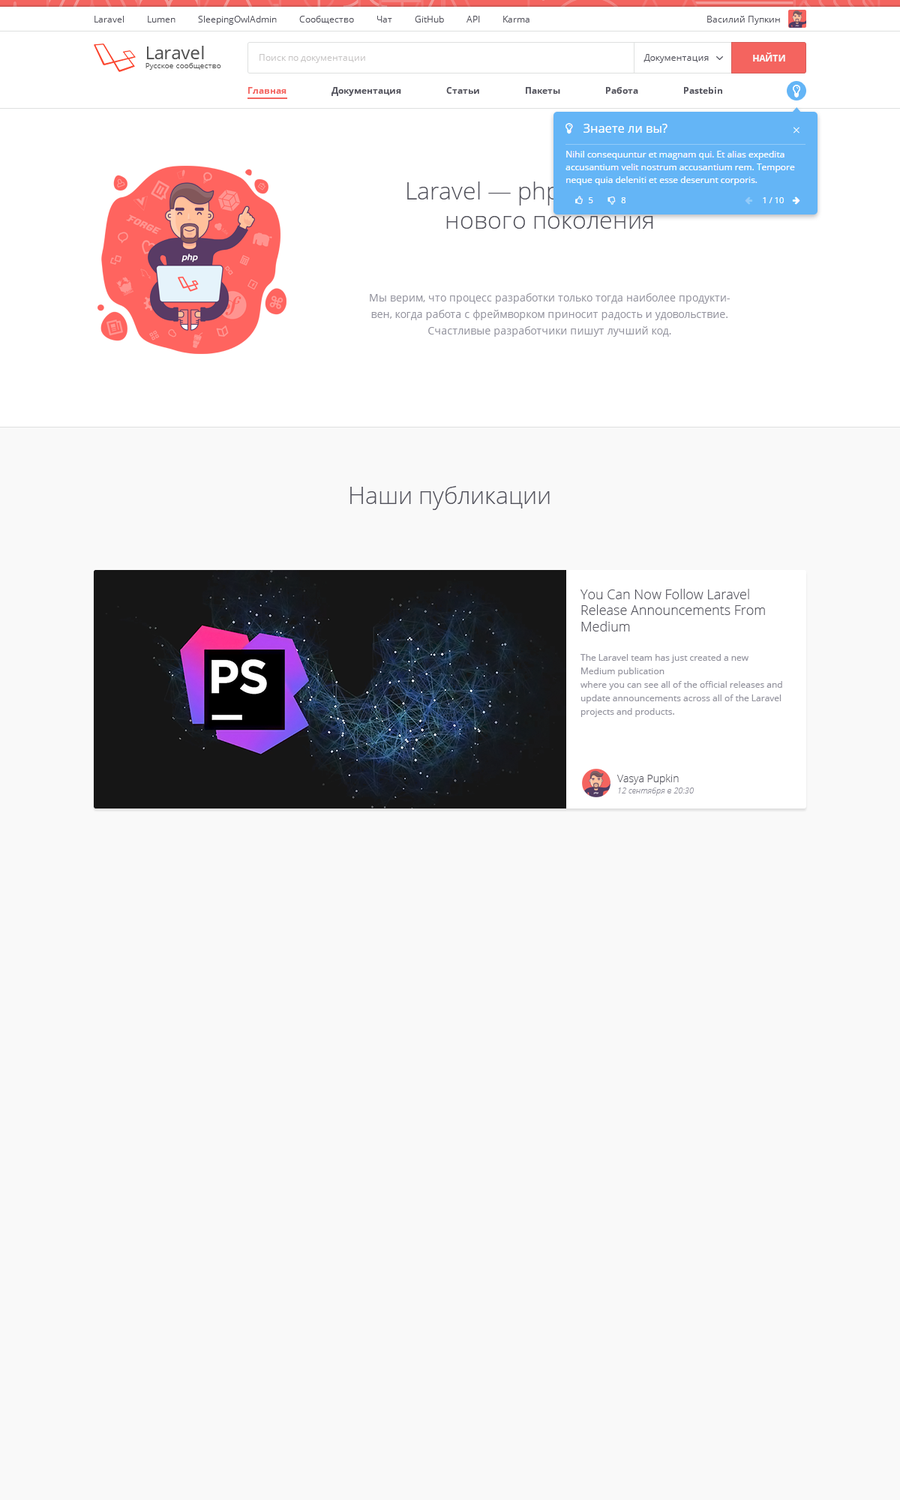
<style>
.page{position:relative;width:900px;height:1500px;background:#f9f9f9}
.page>*{position:absolute;margin:0}
.t1{font:9px "OpenSans";color:#52525c}
.t2{font:7.5px "OpenSans";color:#525252}
.t3{font:18px "OpenSans";color:#525252}
.t4{font:9px "OpenSans";color:#c7c5c5}
.t5{font:9px "OpenSans-Bold";color:#f9f9f9}
.t6{font:9px "OpenSans-Bold";color:#52525c}
.t7{font:9px "OpenSans-Bold";color:#f4645f}
.t8{font:24px "OpenSans-Light";color:#52525c}
.t9{font:10.5px/16.5px "OpenSans";color:#93939e}
.t10{font:13.5px "OpenSans-Light";color:#52525c}
.t11{font:9px/13.5px "OpenSans";color:#93939e}
.t12{font:10.5px "OpenSans-Light";color:#52525c}
.t13{font:8.2px "OpenSansLight-Italic";color:#93939e}
</style>
<div class="page">
<p class="t1" style="left:94px;top:16px;width:436px;height:9px">Laravel          Lumen          SleepingOwlAdmin          Сообщество          Чат          GitHub          API          Karma</p>
<p class="t1" style="left:707px;top:16px;width:73px;height:9px">Василий Пупкин</p>
<p class="t2" style="left:146px;top:46px;width:75px;height:24px"><span class="t3">Laravel<br></span>Русское сообщество</p>
<p class="t4" style="left:260px;top:54px;width:105px;height:9px">Поиск по документации</p>
<p class="t1" style="left:644px;top:54px;width:65px;height:9px">Документация</p>
<p class="t5" style="left:753px;top:52px;width:32px;height:10px">НАЙТИ</p>
<p class="t6" style="left:248px;top:87px;width:474px;height:9px"><span class="t7">Главная</span>                    Документация                    Статьи                    Пакеты                    Работа                    Pastebin</p>
<p class="t8" style="left:407px;top:182px;width:288px;height:47px;text-align:center">Laravel — php-фреймворк <br>нового поколения</p>
<p class="t9" style="left:370px;top:293px;width:360px;height:44px;text-align:center">Мы верим, что процесс разработки только тогда наиболее продуктивен, когда работа с фреймворком приносит радость и удовольствие. <br>Счастливые разработчики пишут лучший код.</p>
<p class="t8" style="left:350px;top:486px;width:200px;height:24px">Наши публикации</p>
<p class="t10" style="left:580px;top:589px;width:185px;height:43px">You Can Now Follow Laravel Release Announcements From Medium</p>
<p class="t11" style="left:580px;top:654px;width:202px;height:63px">The Laravel team has just created a new<br>Medium publication<br>where you can see all of the official releases and update announcements across all of the Laravel projects and products.</p>
<p class="t12" style="left:617px;top:774px;width:62px;height:10px">Vasya Pupkin</p>
<p class="t13" style="left:618px;top:788px;width:76px;height:8px">12 сентября в 20:30</p>
</div>
